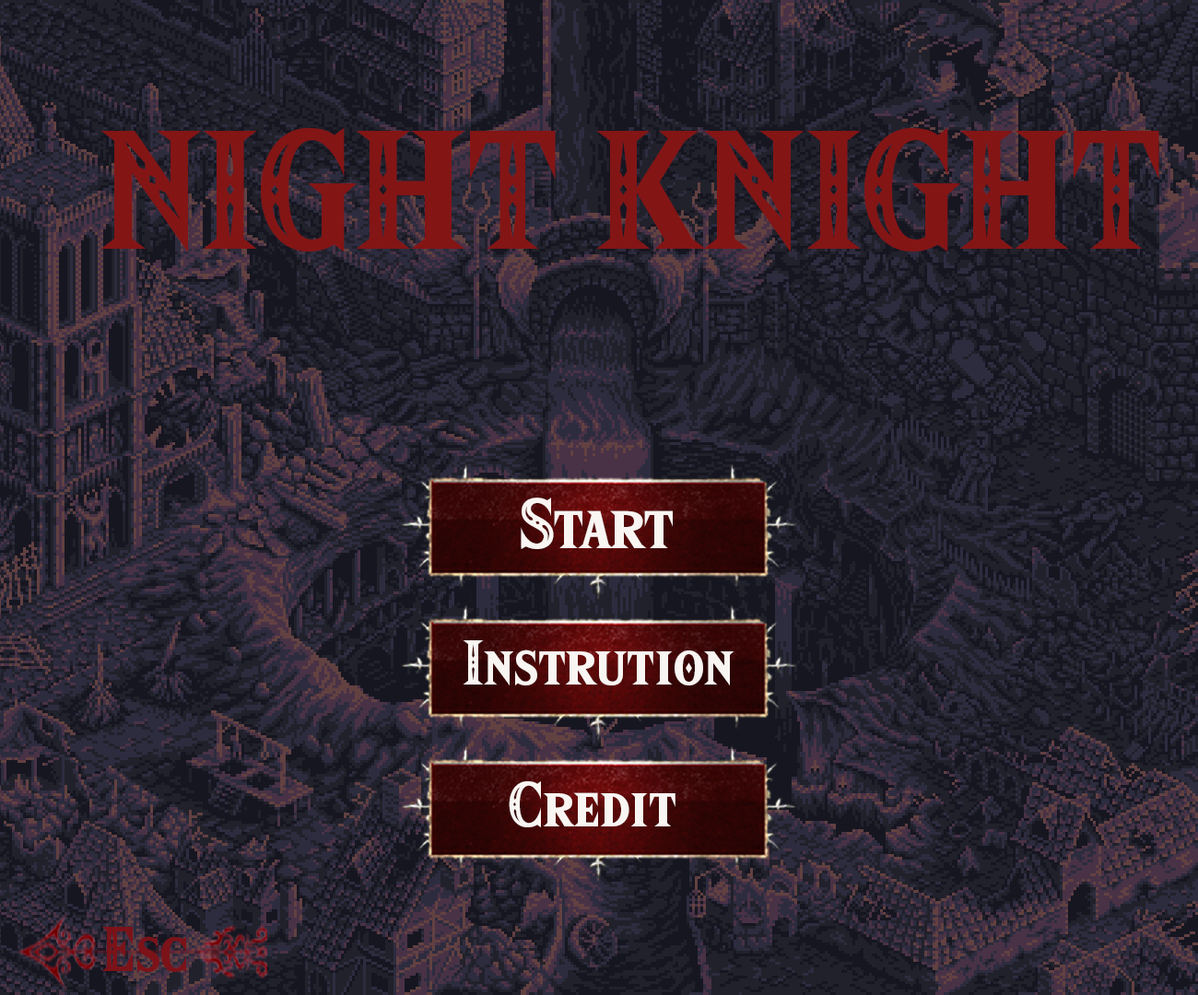
<style>
.page{position:relative;width:1198px;height:995px}
.page>*{position:absolute;margin:0}
.t1{font:147.5px "HyliaSerifBeta-Regular";color:#831515}
.t2{font:61.4px "HyliaSerifBeta-Regular";color:#f9f5f2}
.t3{font:55.3px "HyliaSerifBeta-Regular";color:#f9f5f2}
.t4{font:55.3px "HyliaSerifBeta-Regular";color:#7b1319}
</style>
<div class="page">
<p class="t1" style="left:100px;top:128px;width:1059px;height:125px">NIGHT KNIGHT</p>
<p class="t2" style="left:521px;top:498px;width:152px;height:51px">Start</p>
<p class="t3" style="left:463px;top:640px;width:271px;height:46px">Instrution</p>
<p class="t3" style="left:509px;top:782px;width:167px;height:46px">Credit</p>
<p class="t4" style="left:101px;top:927px;width:85px;height:45px">Esc</p>
</div>
